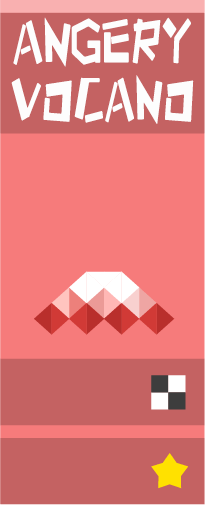
<style>
.page{position:relative;width:205px;height:505px;background:#f67b7b}
.page>*{position:absolute;margin:0}
.t1{font:79.7px "HappyZcool";letter-spacing:-0.02em;color:#fdfdfd;text-transform:uppercase;scale:0.67 1}
</style>
<div class="page">
<p class="t1" style="left:11px;top:17px;width:183px;height:107px;text-align:center">ANGERY<br>VOCANO</p>
</div>
